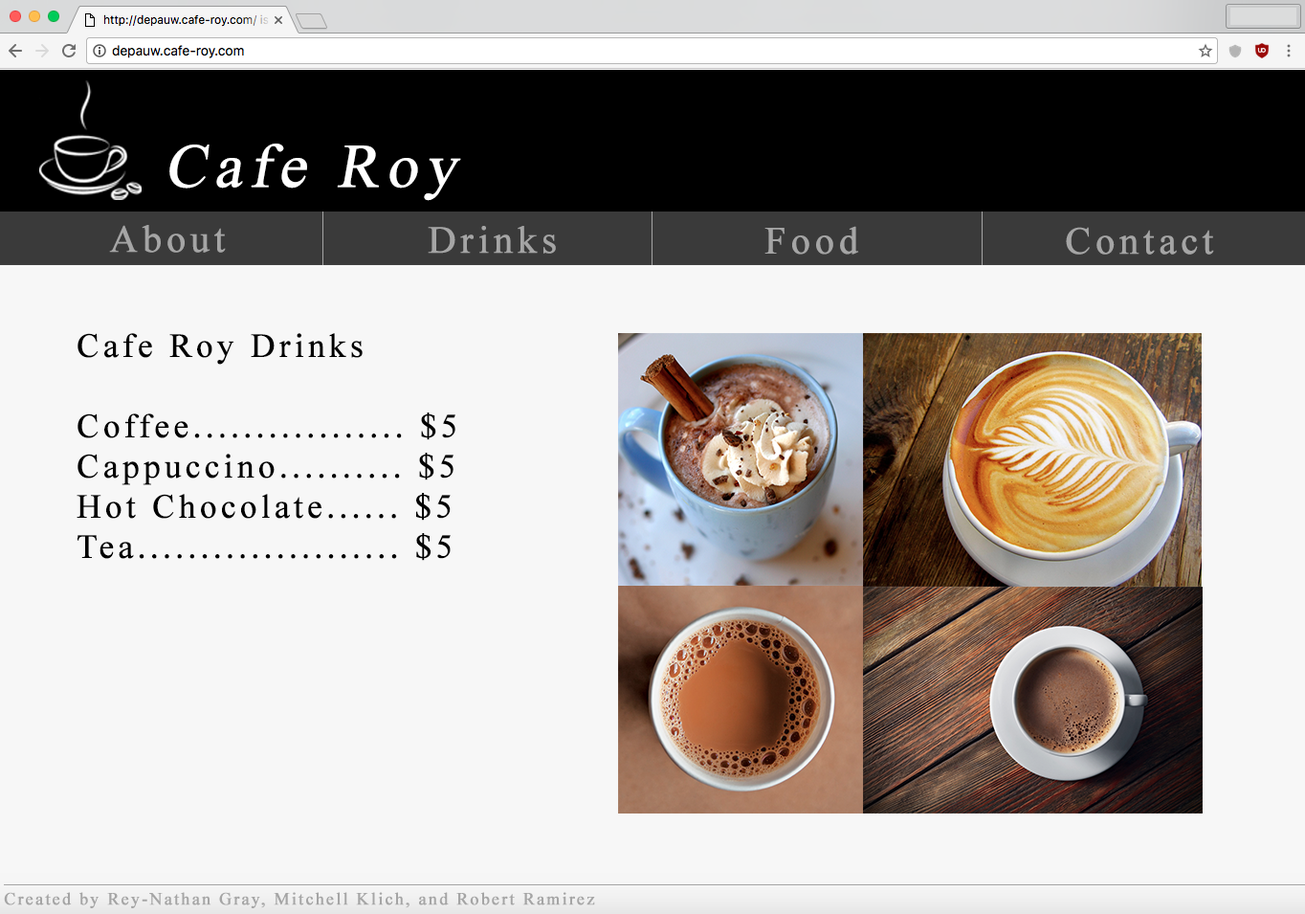
<style>
.page{position:relative;width:1305px;height:914px;background:#f7f7f7}
.page>*{position:absolute;margin:0}
.t1{font:61.7px "TimesNewRomanPSMT";letter-spacing:0.1em;color:#ffffff;font-weight:bold;font-style:italic}
.t2{font:38.3px "TimesNewRomanPSMT";letter-spacing:0.1em;color:#a5a5a5;font-weight:bold}
.t3{font:33.5px "TimesNewRomanPSMT";letter-spacing:0.1em;color:#000000;font-weight:bold}
.t4{font:17.2px "TimesNewRomanPSMT";letter-spacing:0.1em;color:#a5a5a5;font-weight:bold}
</style>
<div class="page">
<p class="t1" style="left:169px;top:144px;width:292px;height:57px">Cafe Roy</p>
<p class="t2" style="left:109px;top:225px;width:117px;height:28px">About</p>
<p class="t2" style="left:428px;top:226px;width:128px;height:28px">Drinks</p>
<p class="t2" style="left:764px;top:226px;width:95px;height:29px">Food</p>
<p class="t2" style="left:1066px;top:227px;width:148px;height:28px">Contact</p>
<p class="t3" style="left:77px;top:333px;width:378px;height:228px">Cafe Roy Drinks <br><br>Coffee................. $5<br>Cappuccino.......... $5<br>Hot Chocolate...... $5<br>Tea..................... $5</p>
<p class="t4" style="left:4px;top:892px;width:591px;height:16px">Created by Rey-Nathan Gray, Mitchell Klich, and Robert Ramirez</p>
</div>
